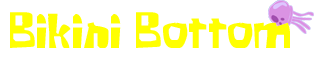
<style>
.page{position:relative;width:330px;height:60px;background:#ffffff}
.page>*{position:absolute;margin:0}
.t1{font:48px "KrabbyPatty";color:#ffff01}
</style>
<div class="page">
<p class="t1" style="left:10px;top:12px;width:280px;height:36px">Bikini Bottom</p>
</div>
